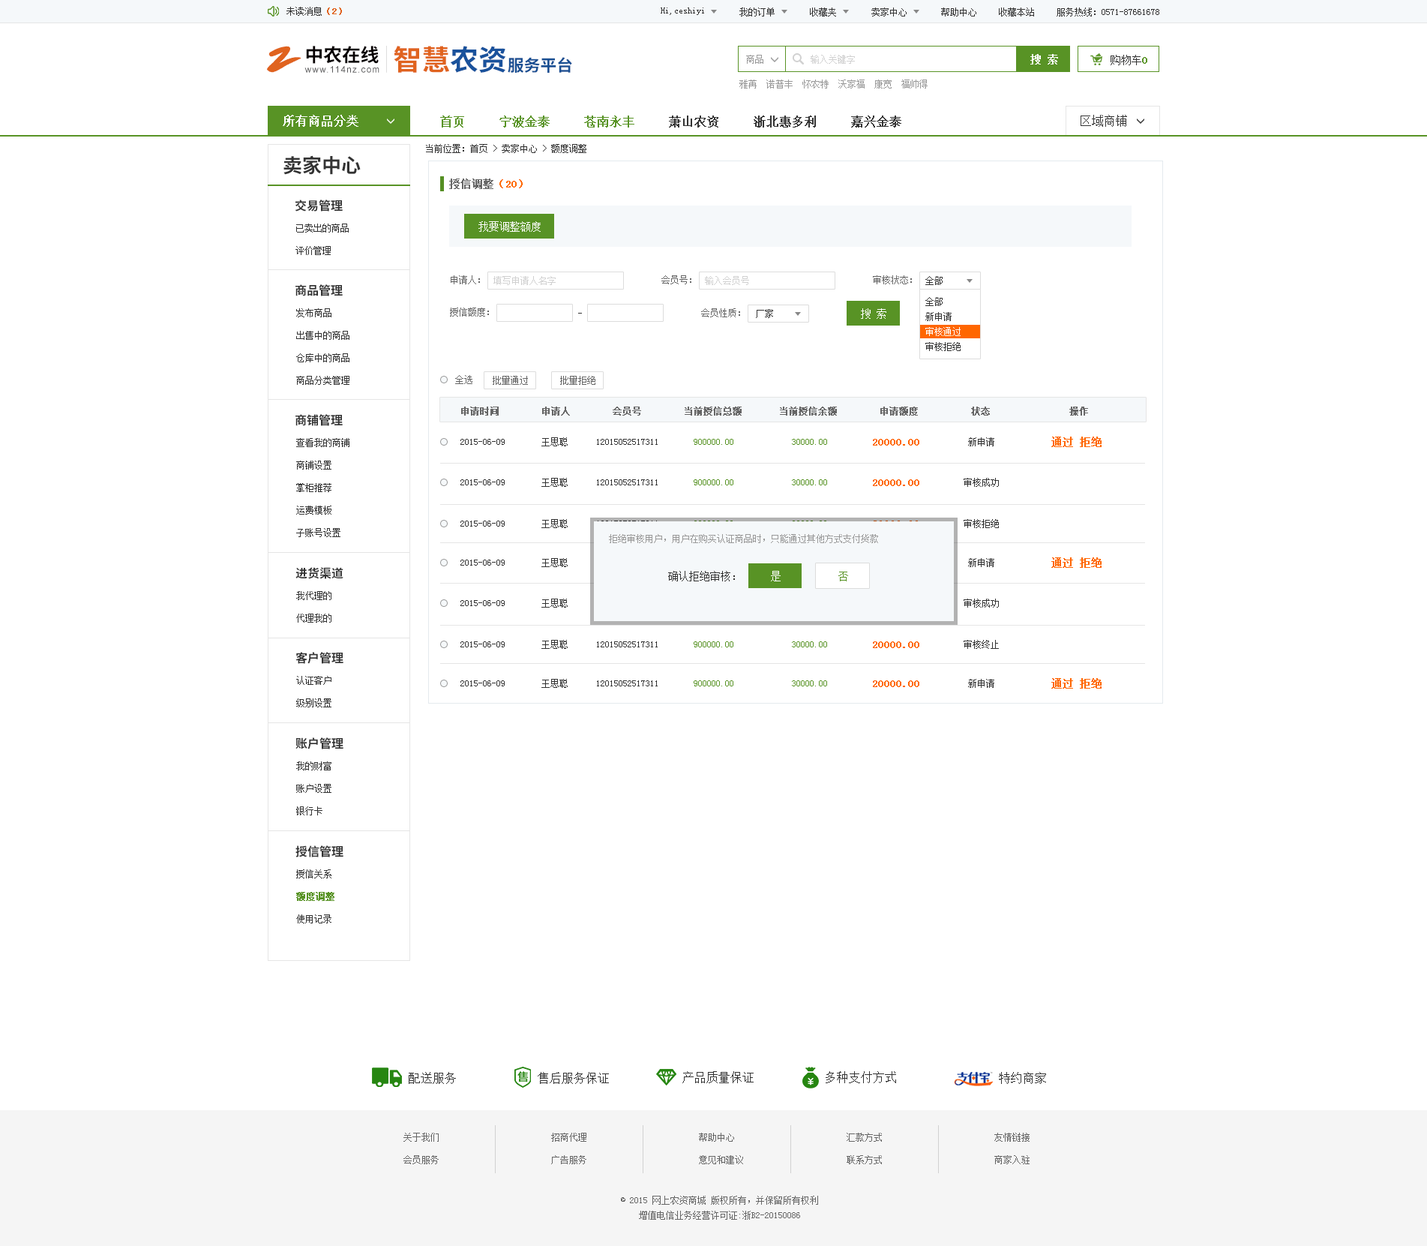
<style>
.page{position:relative;width:1427px;height:1246px;background:#ffffff}
.page>*{position:absolute;margin:0}
.t1{font:9px "SimSun";color:#333333}
.t2{font:9px "SimSun";color:#e0631f;font-weight:bold}
.t3{font:38px "SmudgerLetPlain";color:#e0631f}
.t4{font:18.6px "SourceHanSansCN-Bold";color:#060001}
.t5{font:28.4px "SourceHanSansCN-Bold";color:#e0631f}
.t6{font:28.4px "SourceHanSansCN-Bold";color:#1a529c}
.t7{font:10.5px "SimSun";color:#ffffff;font-weight:bold}
.t8{font:16.3px "SourceHanSansCN-Bold";color:#194f93}
.t9{font:9px "SimSun";color:#999999}
.t10{font:9px "SimSun";color:#d1d1d1}
.t11{font:10.5px "SimSun";color:#333333}
.t12{font:10.5px "SimSun";color:#589325;font-weight:bold}
.t13{font:8.9px "ArialMT";letter-spacing:0.1em;color:#585859}
.t14{font:12px "SimSun";color:#ffffff;font-weight:bold}
.t15{font:12px "SimSun";color:#333333;font-weight:bold}
.t16{font:12px "SimSun";color:#589325;font-weight:bold}
.t17{font:12px "SimSun";color:#333333}
.t18{font:19.5px "SourceHanSansCN-Bold";color:#333333}
.t19{font:10.5px "SimSun";color:#666666;font-weight:bold}
.t20{font:10.5px "SimSun";color:#ff6600;font-weight:bold}
.t21{font:12px "SourceHanSansCN-Bold";color:#333333}
.t22{font:10.5px "SimSun";color:#ffffff}
.t23{font:9px/22.5px "SimSun";color:#333333}
.t24{font:9px "SimSun";color:#666666}
.t25{font:9px/15px "SimSun";color:#333333}
.t26{font:9px/15px "SimSun";color:#ffffff}
.t27{font:9px "SimSun";color:#666666;font-weight:bold}
.t28{font:9px "SimSun";color:#589325}
.t29{font:10.5px "SimSun";color:#589325}
.t30{font:9px/22.5px "SimSun";color:#589325;font-weight:bold}
.t31{font:9px/22.5px "SimSun";color:#666666}
.t32{font:9px/15px "SimSun";color:#666666}
</style>
<div class="page">
<p class="t1" style="left:286px;top:7px;width:56px;height:9px">未读消息<span class="t2">（2）</span></p>
<p class="t1" style="left:661px;top:8px;width:43px;height:7px">Hi,ceshiyi</p>
<p class="t1" style="left:740px;top:8px;width:35px;height:8px">我的订单</p>
<p class="t1" style="left:810px;top:8px;width:26px;height:8px">收藏夹</p>
<p class="t1" style="left:872px;top:8px;width:35px;height:8px">卖家中心</p>
<p class="t1" style="left:941px;top:8px;width:35px;height:8px">帮助中心</p>
<p class="t1" style="left:999px;top:8px;width:35px;height:8px">收藏本站</p>
<p class="t1" style="left:1057px;top:8px;width:103px;height:8px">服务热线：0571-87661678</p>
<p class="t3" style="left:267px;top:46px;width:35px;height:27px">Z</p>
<p class="t4" style="left:306px;top:46px;width:73px;height:18px">中农在线</p>
<p class="t5" style="left:394px;top:46px;width:112px;height:27px">智慧<span class="t6">农资</span></p>
<p class="t7" style="left:1030px;top:54px;width:28px;height:10px">搜 索</p>
<p class="t8" style="left:508px;top:57px;width:64px;height:16px">服务平台</p>
<p class="t9" style="left:746px;top:55px;width:18px;height:9px">商品</p>
<p class="t10" style="left:811px;top:55px;width:44px;height:9px">输入关键字</p>
<p class="t11" style="left:1111px;top:55px;width:37px;height:10px">购物车<span class="t12">0</span></p>
<p class="t13" style="left:304px;top:66px;width:76px;height:7px">www.114nz.com</p>
<p class="t9" style="left:740px;top:80px;width:188px;height:8px">雅苒  诺普丰  怀农特  沃家福  康宽  福帅得</p>
<p class="t14" style="left:283px;top:115px;width:75px;height:12px">所有商品分类</p>
<p class="t15" style="left:440px;top:116px;width:462px;height:12px"><span class="t16">首页     宁波金泰     苍南永丰    </span> 萧山农资     浙北惠多利     嘉兴金泰</p>
<p class="t17" style="left:1081px;top:115px;width:46px;height:12px">区域商铺</p>
<p class="t1" style="left:426px;top:144px;width:160px;height:9px">当前位置：首页 &gt; 卖家中心 &gt; 额度调整</p>
<p class="t18" style="left:284px;top:155px;width:77px;height:20px">卖家中心</p>
<p class="t19" style="left:449px;top:178px;width:74px;height:11px">授信调整<span class="t20">（20）</span></p>
<p class="t21" style="left:295px;top:200px;width:48px;height:12px">交易管理</p>
<p class="t22" style="left:478px;top:221px;width:63px;height:11px">我要调整额度</p>
<p class="t23" style="left:296px;top:224px;width:53px;height:31px">已卖出的商品<br>评价管理</p>
<p class="t24" style="left:451px;top:275px;width:29px;height:9px">申请人：</p>
<p class="t10" style="left:494px;top:276px;width:62px;height:9px">填写申请人名字</p>
<p class="t24" style="left:662px;top:275px;width:30px;height:9px">会员号：</p>
<p class="t10" style="left:705px;top:276px;width:44px;height:9px">输入会员号</p>
<p class="t24" style="left:873px;top:275px;width:39px;height:9px">审核状态：</p>
<p class="t1" style="left:926px;top:276px;width:17px;height:9px">全部</p>
<p class="t21" style="left:296px;top:284px;width:47px;height:12px">商品管理</p>
<p class="t25" style="left:926px;top:297px;width:35px;height:54px">全部<br>新申请<br><span class="t26">审核通过<br></span>审核拒绝</p>
<p class="t23" style="left:296px;top:308px;width:54px;height:77px">发布商品<br>出售中的商品<br>仓库中的商品<br>商品分类管理</p>
<p class="t24" style="left:450px;top:308px;width:39px;height:8px">授信额度：</p>
<p class="t24" style="left:701px;top:308px;width:39px;height:9px">会员性质：</p>
<p class="t1" style="left:756px;top:309px;width:17px;height:9px">厂家</p>
<p class="t22" style="left:861px;top:308px;width:25px;height:11px">搜 索</p>
<p class="t24" style="left:455px;top:375px;width:17px;height:9px">全选</p>
<p class="t24" style="left:493px;top:376px;width:35px;height:9px">批量通过</p>
<p class="t24" style="left:560px;top:376px;width:36px;height:9px">批量拒绝</p>
<p class="t21" style="left:296px;top:414px;width:47px;height:12px">商铺管理</p>
<p class="t27" style="left:461px;top:406px;width:627px;height:10px">申请时间        申请人        会员号        当前授信总额       当前授信余额        申请额度          状态               操作</p>
<p class="t23" style="left:296px;top:438px;width:54px;height:99px">查看我的商铺<br>商铺设置<br>掌柜推荐<br>运费模板<br>子账号设置</p>
<p class="t1" style="left:542px;top:437px;width:26px;height:9px">王思聪</p>
<p class="t1" style="left:968px;top:437px;width:26px;height:9px">新申请</p>
<p class="t20" style="left:1052px;top:436px;width:50px;height:11px">通过 拒绝</p>
<p class="t1" style="left:460px;top:439px;width:45px;height:6px">2015-06-09</p>
<p class="t1" style="left:597px;top:439px;width:61px;height:6px">12015052517311</p>
<p class="t28" style="left:694px;top:439px;width:40px;height:6px">900000.00</p>
<p class="t28" style="left:792px;top:439px;width:35px;height:6px">30000.00</p>
<p class="t20" style="left:873px;top:439px;width:47px;height:7px">20000.00</p>
<p class="t1" style="left:460px;top:479px;width:45px;height:6px">2015-06-09</p>
<p class="t1" style="left:542px;top:478px;width:26px;height:9px">王思聪</p>
<p class="t1" style="left:597px;top:479px;width:61px;height:6px">12015052517311</p>
<p class="t28" style="left:694px;top:479px;width:40px;height:6px">900000.00</p>
<p class="t28" style="left:792px;top:479px;width:35px;height:6px">30000.00</p>
<p class="t20" style="left:873px;top:479px;width:47px;height:7px">20000.00</p>
<p class="t1" style="left:964px;top:478px;width:35px;height:9px">审核成功</p>
<p class="t1" style="left:460px;top:520px;width:45px;height:6px">2015-06-09</p>
<p class="t1" style="left:542px;top:519px;width:26px;height:9px">王思聪</p>
<p class="t1" style="left:964px;top:519px;width:35px;height:9px">审核拒绝</p>
<p class="t9" style="left:609px;top:534px;width:269px;height:9px">拒绝审核用户，用户在购买认证商品时，只能通过其他方式支付货款</p>
<p class="t1" style="left:542px;top:558px;width:26px;height:9px">王思聪</p>
<p class="t1" style="left:968px;top:558px;width:26px;height:9px">新申请</p>
<p class="t20" style="left:1052px;top:557px;width:50px;height:11px">通过 拒绝</p>
<p class="t21" style="left:296px;top:567px;width:48px;height:12px">进货渠道</p>
<p class="t1" style="left:460px;top:560px;width:45px;height:6px">2015-06-09</p>
<p class="t11" style="left:668px;top:571px;width:67px;height:10px">确认拒绝审核：</p>
<p class="t22" style="left:771px;top:571px;width:10px;height:10px">是</p>
<p class="t29" style="left:838px;top:572px;width:10px;height:9px">否</p>
<p class="t23" style="left:296px;top:591px;width:36px;height:31px">我代理的<br>代理我的</p>
<p class="t1" style="left:460px;top:600px;width:45px;height:6px">2015-06-09</p>
<p class="t1" style="left:542px;top:598px;width:26px;height:10px">王思聪</p>
<p class="t1" style="left:964px;top:598px;width:35px;height:10px">审核成功</p>
<p class="t1" style="left:460px;top:641px;width:45px;height:6px">2015-06-09</p>
<p class="t1" style="left:542px;top:640px;width:26px;height:9px">王思聪</p>
<p class="t1" style="left:597px;top:641px;width:61px;height:6px">12015052517311</p>
<p class="t28" style="left:694px;top:641px;width:40px;height:6px">900000.00</p>
<p class="t28" style="left:792px;top:641px;width:35px;height:6px">30000.00</p>
<p class="t20" style="left:873px;top:641px;width:47px;height:7px">20000.00</p>
<p class="t1" style="left:964px;top:640px;width:35px;height:9px">审核终止</p>
<p class="t21" style="left:296px;top:652px;width:48px;height:12px">客户管理</p>
<p class="t23" style="left:296px;top:676px;width:36px;height:31px">认证客户<br>级别设置</p>
<p class="t20" style="left:1052px;top:678px;width:50px;height:10px">通过 拒绝</p>
<p class="t1" style="left:460px;top:680px;width:45px;height:6px">2015-06-09</p>
<p class="t1" style="left:542px;top:679px;width:26px;height:9px">王思聪</p>
<p class="t1" style="left:597px;top:680px;width:61px;height:6px">12015052517311</p>
<p class="t28" style="left:694px;top:680px;width:40px;height:6px">900000.00</p>
<p class="t28" style="left:792px;top:680px;width:35px;height:6px">30000.00</p>
<p class="t20" style="left:873px;top:680px;width:47px;height:7px">20000.00</p>
<p class="t1" style="left:968px;top:679px;width:26px;height:9px">新申请</p>
<p class="t21" style="left:296px;top:737px;width:48px;height:12px">账户管理</p>
<p class="t23" style="left:296px;top:761px;width:36px;height:54px">我的财富<br>账户设置<br>银行卡</p>
<p class="t21" style="left:296px;top:845px;width:48px;height:12px">授信管理</p>
<p class="t23" style="left:296px;top:869px;width:38px;height:54px">授信关系<br><span class="t30">额度调整<br></span>使用记录</p>
<p class="t17" style="left:409px;top:1072px;width:47px;height:12px">配送服务</p>
<p class="t17" style="left:538px;top:1072px;width:71px;height:12px">售后服务保证</p>
<p class="t17" style="left:682px;top:1071px;width:72px;height:12px">产品质量保证</p>
<p class="t17" style="left:826px;top:1071px;width:70px;height:12px">多种支付方式</p>
<p class="t17" style="left:999px;top:1072px;width:47px;height:12px">特约商家</p>
<p class="t31" style="left:404px;top:1132px;width:35px;height:32px">关于我们<br>会员服务</p>
<p class="t31" style="left:551px;top:1132px;width:35px;height:32px">招商代理<br>广告服务</p>
<p class="t31" style="left:699px;top:1132px;width:44px;height:32px">帮助中心<br>意见和建议</p>
<p class="t31" style="left:847px;top:1132px;width:35px;height:32px">汇款方式<br>联系方式</p>
<p class="t31" style="left:994px;top:1132px;width:36px;height:32px">友情链接<br>商家入驻</p>
<p class="t32" style="left:621px;top:1196px;width:197px;height:24px;text-align:center">© 2015 网上农资商城 版权所有，并保留所有权利<br>增值电信业务经营许可证:浙B2-20150086</p>
</div>
